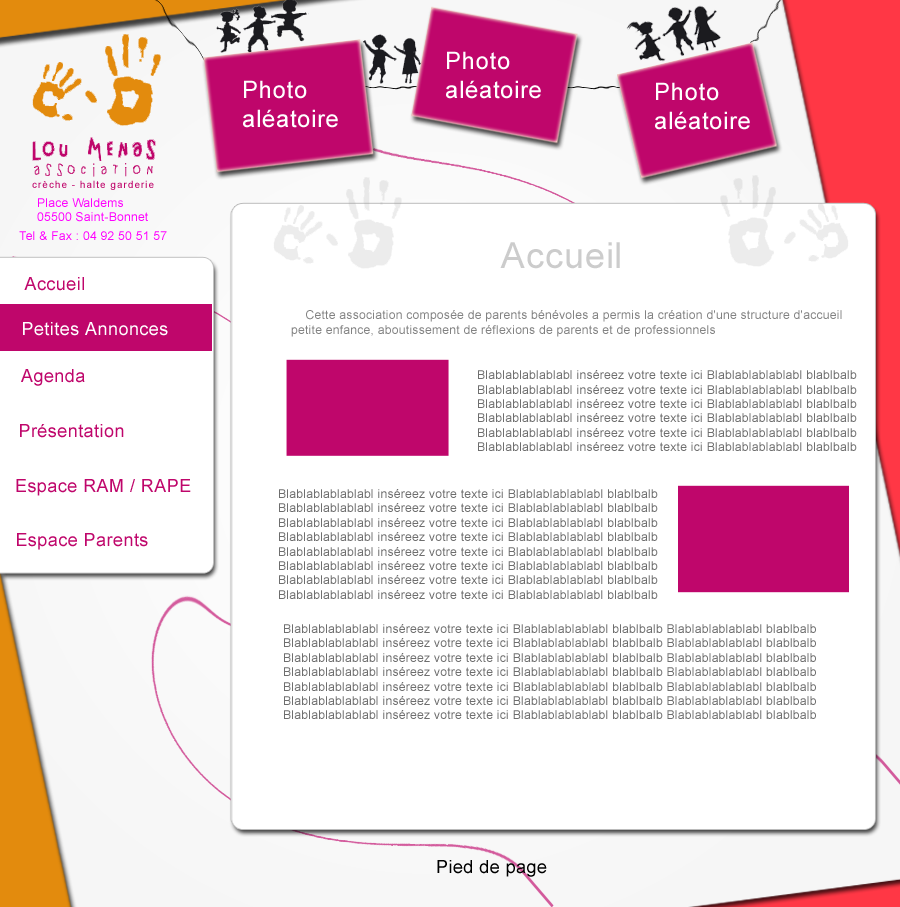
<style>
.page{position:relative;width:900px;height:907px;background:#ffffff}
.page>*{position:absolute;margin:0}
.t1{font:24px "ArialMT";letter-spacing:0.025em;color:#ffffff}
.t2{font:36px "ArialMT";letter-spacing:0.025em;color:#cccccc}
.t3{font:18px "ArialMT";letter-spacing:0.025em;color:#bf066b}
.t4{font:12px "ArialMT";letter-spacing:0.025em;color:#828282}
.t5{font:18px "ArialMT";letter-spacing:0.025em;color:#ffffff}
.t6{font:12px "ArialMT";letter-spacing:0.025em;color:#6e6e6e}
.t7{font:18px "ArialMT";letter-spacing:0.025em;color:#000000}
</style>
<div class="page">
<p class="t1" style="left:446px;top:51px;width:95px;height:48px">Photo<br>aléatoire</p>
<p class="t1" style="left:243px;top:80px;width:95px;height:48px">Photo<br>aléatoire</p>
<p class="t1" style="left:655px;top:82px;width:95px;height:48px">Photo<br>aléatoire</p>
<p class="t2" style="left:500px;top:242px;width:120px;height:27px">Accueil</p>
<p class="t3" style="left:24px;top:277px;width:60px;height:14px">Accueil</p>
<p class="t4" style="left:291px;top:310px;width:551px;height:27px">Cette association composée de parents bénévoles a permis la création d'une structure d'accueil <br>petite enfance, aboutissement de réflexions de parents et de professionnels</p>
<p class="t5" style="left:23px;top:322px;width:145px;height:14px">Petites Annonces</p>
<p class="t3" style="left:21px;top:369px;width:64px;height:17px">Agenda</p>
<p class="t6" style="left:478px;top:370px;width:379px;height:81px">Blablablablablabl inséreez votre texte ici Blablablablablabl blablbalb<br>Blablablablablabl inséreez votre texte ici Blablablablablabl blablbalb<br>Blablablablablabl inséreez votre texte ici Blablablablablabl blablbalb<br>Blablablablablabl inséreez votre texte ici Blablablablablabl blablbalb<br>Blablablablablabl inséreez votre texte ici Blablablablablabl blablbalb<br>Blablablablablabl inséreez votre texte ici Blablablablablabl blablbalb</p>
<p class="t3" style="left:20px;top:424px;width:104px;height:14px">Présentation</p>
<p class="t3" style="left:16px;top:479px;width:175px;height:17px">Espace RAM / RAPE</p>
<p class="t6" style="left:279px;top:489px;width:379px;height:110px">Blablablablablabl inséreez votre texte ici Blablablablablabl blablbalb<br>Blablablablablabl inséreez votre texte ici Blablablablablabl blablbalb<br>Blablablablablabl inséreez votre texte ici Blablablablablabl blablbalb<br>Blablablablablabl inséreez votre texte ici Blablablablablabl blablbalb<br>Blablablablablabl inséreez votre texte ici Blablablablablabl blablbalb<br>Blablablablablabl inséreez votre texte ici Blablablablablabl blablbalb<br>Blablablablablabl inséreez votre texte ici Blablablablablabl blablbalb<br>Blablablablablabl inséreez votre texte ici Blablablablablabl blablbalb</p>
<p class="t3" style="left:17px;top:533px;width:131px;height:17px">Espace Parents</p>
<p class="t6" style="left:284px;top:624px;width:532px;height:95px">Blablablablablabl inséreez votre texte ici Blablablablablabl blablbalb Blablablablablabl blablbalb<br>Blablablablablabl inséreez votre texte ici Blablablablablabl blablbalb Blablablablablabl blablbalb<br>Blablablablablabl inséreez votre texte ici Blablablablablabl blablbalb Blablablablablabl blablbalb<br>Blablablablablabl inséreez votre texte ici Blablablablablabl blablbalb Blablablablablabl blablbalb<br>Blablablablablabl inséreez votre texte ici Blablablablablabl blablbalb Blablablablablabl blablbalb<br>Blablablablablabl inséreez votre texte ici Blablablablablabl blablbalb Blablablablablabl blablbalb<br>Blablablablablabl inséreez votre texte ici Blablablablablabl blablbalb Blablablablablabl blablbalb</p>
<p class="t7" style="left:437px;top:860px;width:110px;height:17px">Pied de page</p>
</div>
